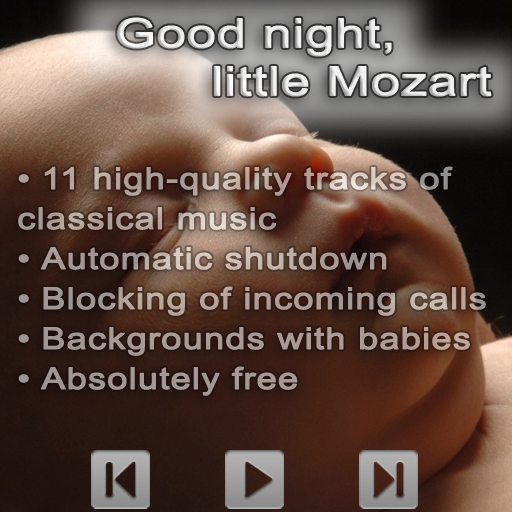
<style>
.page{position:relative;width:512px;height:512px}
.page>*{position:absolute;margin:0}
.t1{font:40px "ArialMT";letter-spacing:-0.005em;font-weight:bold;scale:1.3 1}
.t2{font:30px/40px "ArialMT";letter-spacing:0.01em;color:#ac9c96;font-weight:bold;scale:1.2 1}
</style>
<div class="page">
<p class="t1" style="left:117px;top:17px;width:375px;height:80px;text-align:center">Good night, <br>        little Mozart</p>
<p class="t2" style="left:18px;top:166px;width:468px;height:230px">• 11 high-quality tracks of classical music<br>• Automatic shutdown<br>• Blocking of incoming calls<br>• Backgrounds with babies<br>• Absolutely free</p>
</div>
